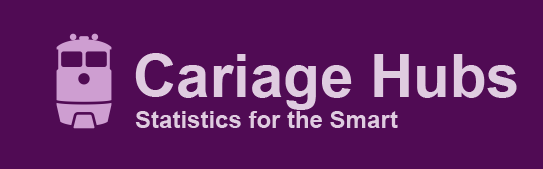
<style>
.page{position:relative;width:543px;height:169px;background:#500b54}
.page>*{position:absolute;margin:0}
.t1{font:60px "Arial-BoldMT";color:#dfcce0}
.t2{font:24px "Arial-BoldMT";color:#dfcce0}
</style>
<div class="page">
<p class="t1" style="left:135px;top:53px;width:382px;height:57px">Cariage Hubs</p>
<p class="t2" style="left:135px;top:111px;width:263px;height:17px">Statistics for the Smart</p>
</div>
